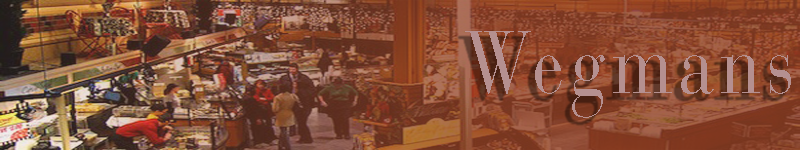
<style>
.page{position:relative;width:800px;height:150px}
.page>*{position:absolute;margin:0}
.t1{font:87.4px "BauerBodoni-Roman";letter-spacing:0.08em;color:#c7917f;scale:0.83 1}
</style>
<div class="page">
<p class="t1" style="left:465px;top:31px;width:326px;height:87px">Wegmans</p>
</div>
